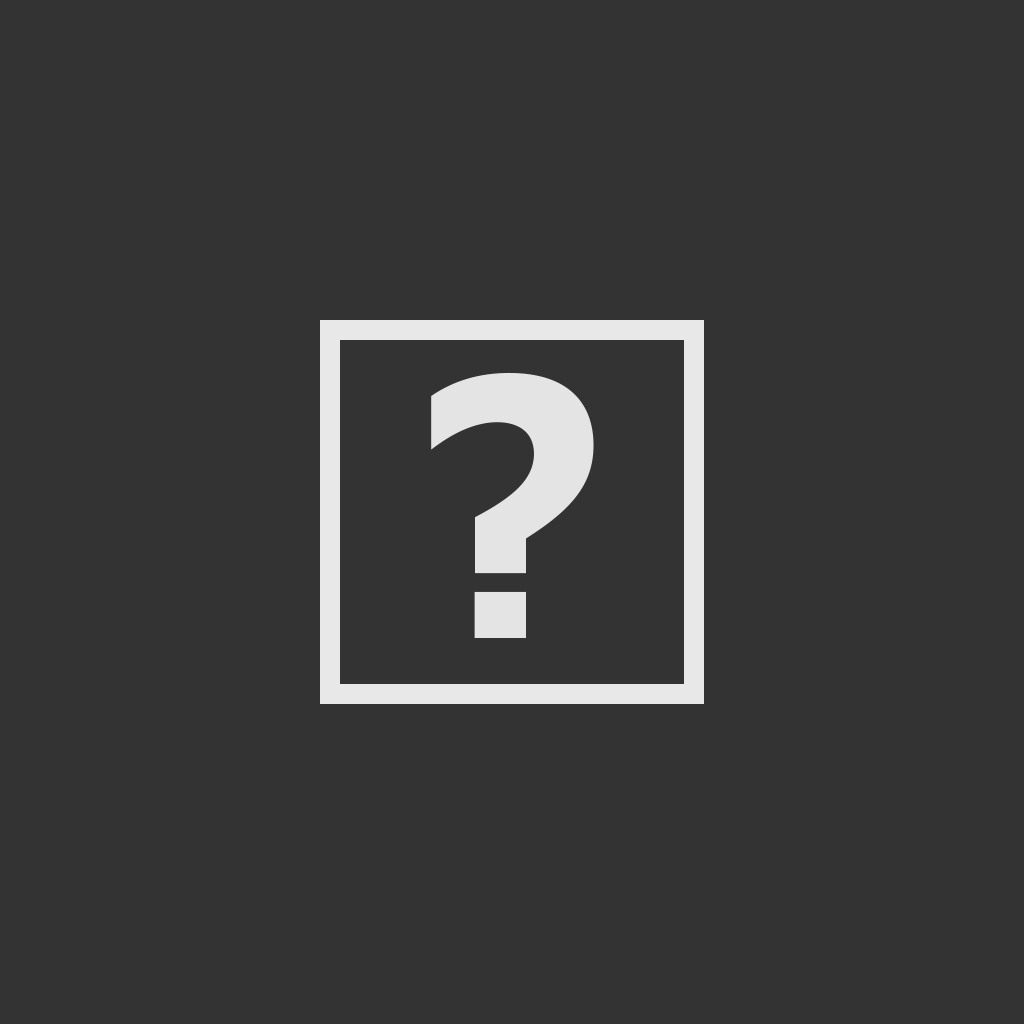
<style>
.page{position:relative;width:1024px;height:1024px;background:#333333}
.page>*{position:absolute;margin:0}
.t1{font:384px "MollenPersonalUse-Bold";color:#e4e4e4}
</style>
<div class="page">
<p class="t1" style="left:431px;top:372px;width:163px;height:266px">?</p>
</div>
